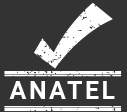
<style>
.page{position:relative;width:127px;height:112px;background:#333333}
.page>*{position:absolute;margin:0}
.t1{font:25px "Roboto-Bold";letter-spacing:0.1em;color:#ffffff}
</style>
<div class="page">
<p class="t1" style="left:9px;top:81px;width:106px;height:18px">ANATEL</p>
</div>
